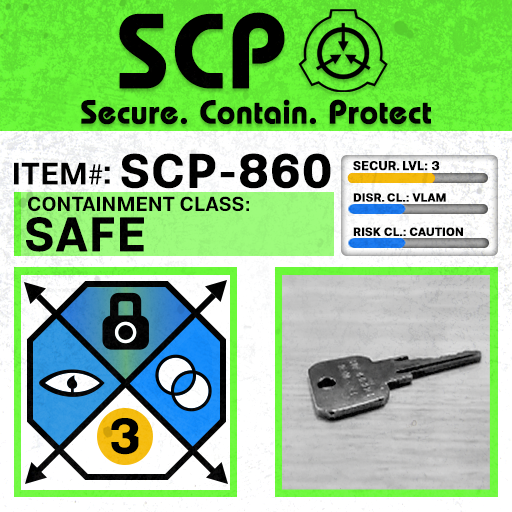
<style>
.page{position:relative;width:512px;height:512px}
.page>*{position:absolute;margin:0}
.t1{font:105.8px "BauhausLT-Demi";color:#000000;font-weight:bold}
.t2{font:33px "BauhausLT-Demi";color:#000000;font-weight:bold}
.t3{font:47.6px "Molde-Semibold";color:#000000;font-weight:bold}
.t4{font:12.5px "Molde-Semibold";color:#000000;font-weight:bold}
.t5{font:31.1px "Molde-Semibold";color:#000000}
.t6{font:31.1px "MyriadPro-Regular";color:#000000}
.t7{font:34.5px "Molde-Semibold";color:#000000}
.t8{font:20.3px "Molde-Semibold";color:#000000}
.t9{font:11.7px "Molde-Semibold";color:#000000;font-weight:bold}
.t10{font:47.8px "Molde-Semibold";color:#000000;font-weight:bold}
</style>
<div class="page">
<p class="t1" style="left:119px;top:12px;width:166px;height:77px">SCP</p>
<p class="t2" style="left:81px;top:99px;width:350px;height:26px">Secure. Contain. Protect</p>
<p class="t3" style="left:121px;top:153px;width:210px;height:36px">SCP-860</p>
<p class="t4" style="left:353px;top:161px;width:87px;height:10px">SECUR. LVL: 3</p>
<p class="t5" style="left:14px;top:162px;width:89px;height:23px">ITEM<span class="t6">#</span></p>
<p class="t7" style="left:104px;top:166px;width:6px;height:18px">:</p>
<p class="t8" style="left:28px;top:196px;width:221px;height:16px">CONTAINMENT CLASS:</p>
<p class="t9" style="left:353px;top:193px;width:93px;height:9px">DISR. CL.: VLAM</p>
<p class="t10" style="left:26px;top:217px;width:118px;height:35px">SAFE</p>
<p class="t9" style="left:353px;top:227px;width:110px;height:9px">RISK CL.: CAUTION</p>
</div>
